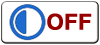
<style>
.page{position:relative;width:100px;height:45px;background:#ffffff}
.page>*{position:absolute;margin:0}
.t1{font:21.9px "Arial-BoldMT";color:#980000;font-weight:bold}
</style>
<div class="page">
<p class="t1" style="left:47px;top:13px;width:45px;height:17px">OFF</p>
</div>
